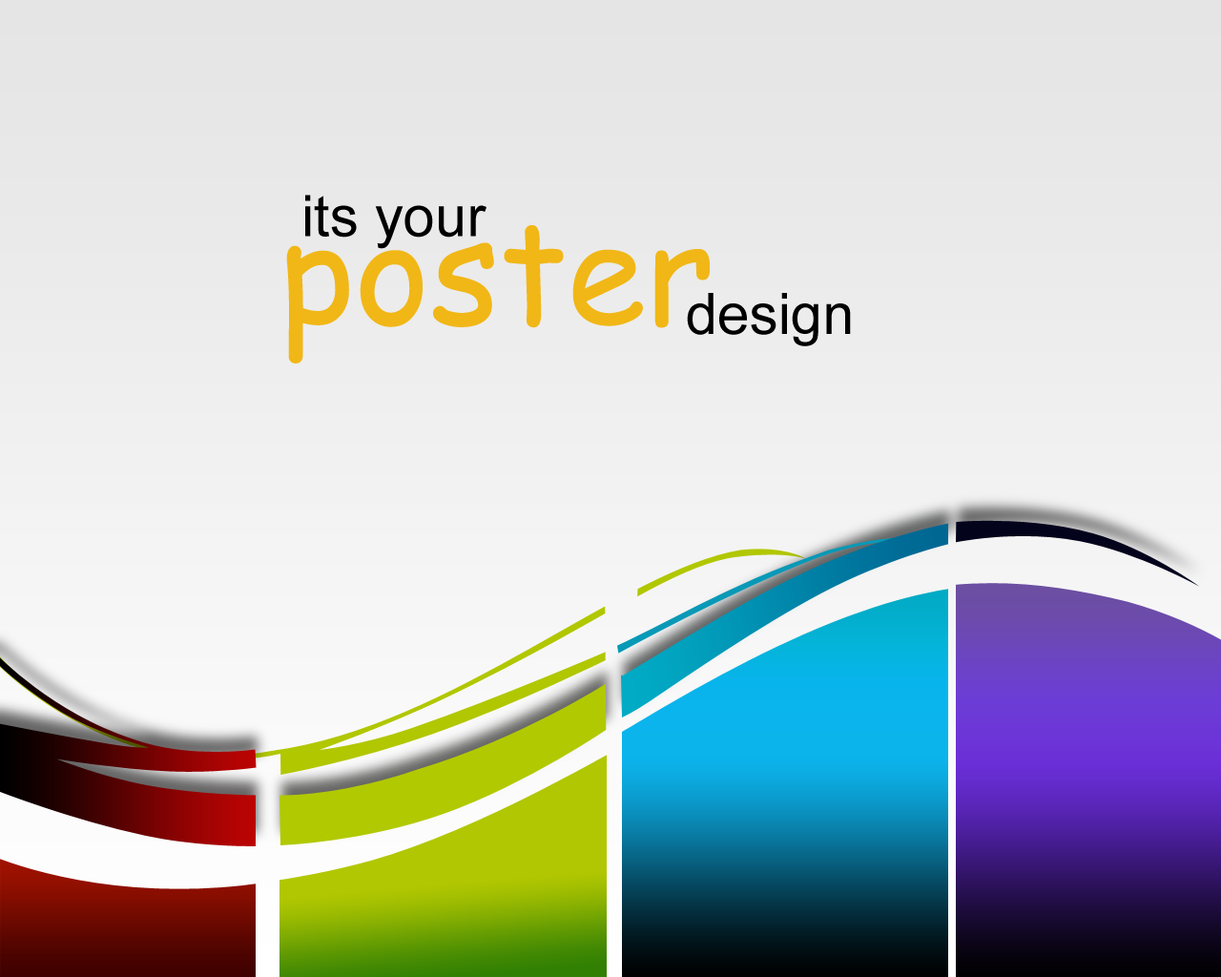
<style>
.page{position:relative;width:1221px;height:977px}
.page>*{position:absolute;margin:0}
.t1{font:57.2px "ArialMT";color:#000000}
.t2{font:143.1px "ComicSansMS";color:#f1b717}
</style>
<div class="page">
<p class="t1" style="left:305px;top:195px;width:181px;height:54px">its your</p>
<p class="t2" style="left:286px;top:225px;width:424px;height:138px">poster</p>
<p class="t1" style="left:687px;top:293px;width:164px;height:53px">design</p>
</div>
